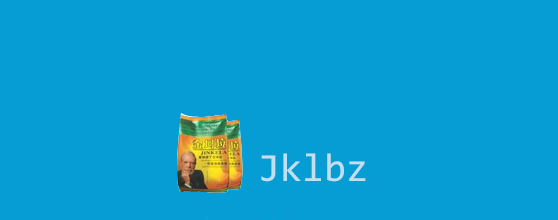
<style>
.page{position:relative;width:558px;height:220px;background:#069dd4}
.page>*{position:absolute;margin:0}
.t1{font:40px "Consolas";color:#c0dff0}
</style>
<div class="page">
<p class="t1" style="left:261px;top:153px;width:105px;height:29px">Jklbz</p>
</div>
